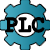
<style>
.page{position:relative;width:50px;height:50px;background:#ffffff}
.page>*{position:absolute;margin:0}
.t1{font:22.5px "CourierNewPSMT";color:#000000}
</style>
<div class="page">
<p class="t1" style="left:6px;top:18px;width:38px;height:14px">PLC</p>
</div>
